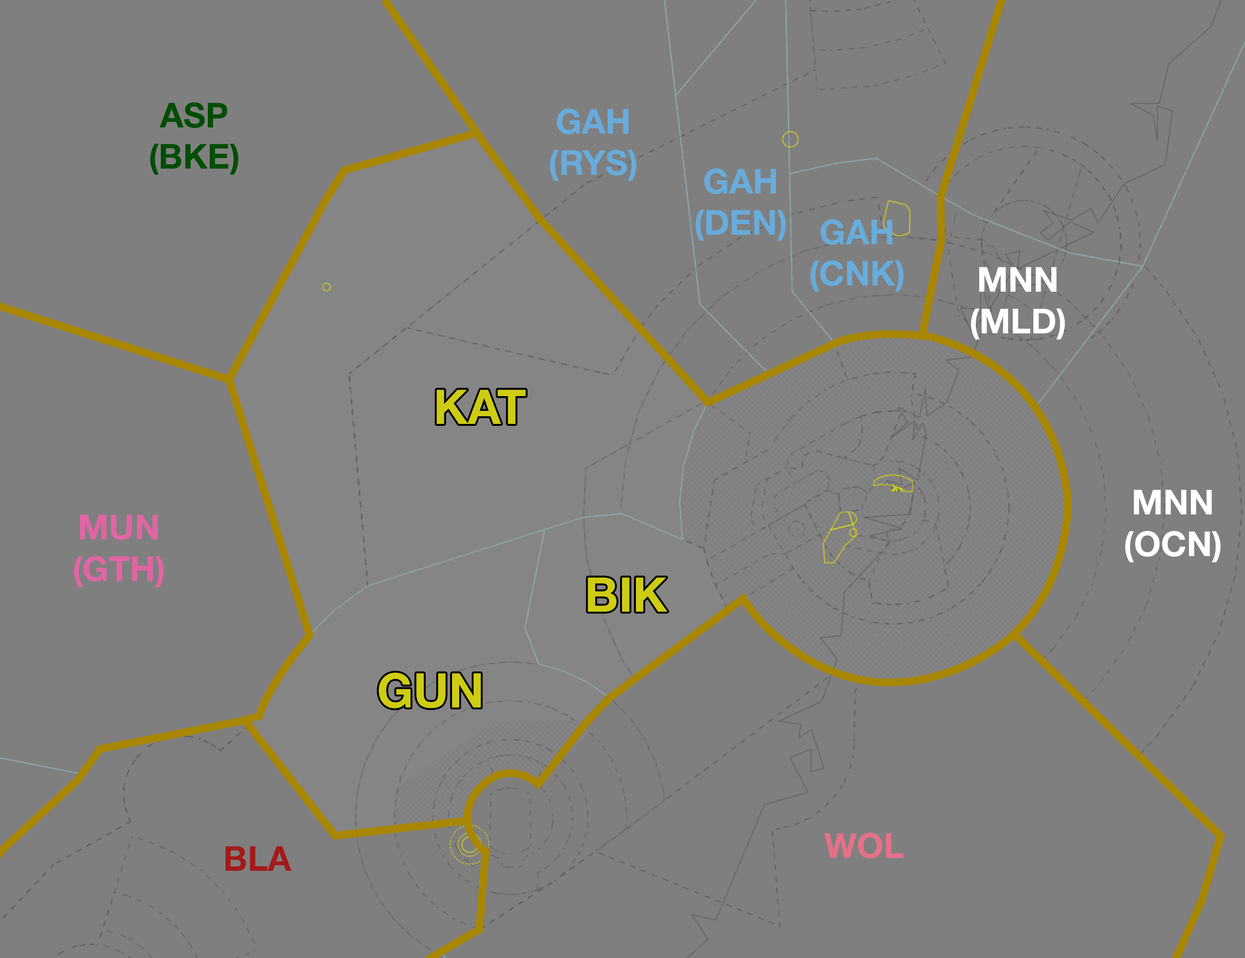
<style>
.page{position:relative;width:1245px;height:958px;background:#7f7f7f}
.page>*{position:absolute;margin:0}
.t1{font:34.5px "HelveticaNeue-Bold";color:#004d04}
.t2{font:34.5px "HelveticaNeue-Bold";color:#67acdc}
.t3{font:34.5px "HelveticaNeue-Bold";color:#ffffff}
.t4{font:47.9px "HelveticaNeue-Bold";color:#cecc13}
.t5{font:34.5px "HelveticaNeue-Bold";color:#e164a5}
.t6{font:34.5px "HelveticaNeue-Bold";color:#e57187}
.t7{font:34.5px "HelveticaNeue-Bold";color:#a31a1a}
</style>
<div class="page">
<p class="t1" style="left:150px;top:102px;width:88px;height:73px;text-align:center">ASP<br>(BKE)</p>
<p class="t2" style="left:550px;top:108px;width:86px;height:73px;text-align:center">GAH<br>(RYS)</p>
<p class="t2" style="left:695px;top:168px;width:91px;height:73px;text-align:center">GAH<br>(DEN)</p>
<p class="t2" style="left:810px;top:219px;width:94px;height:73px;text-align:center">GAH<br>(CNK)</p>
<p class="t3" style="left:971px;top:267px;width:94px;height:73px;text-align:center">MNN<br>(MLD)</p>
<p class="t4" style="left:437px;top:389px;width:89px;height:35px">KAT</p>
<p class="t3" style="left:1125px;top:489px;width:96px;height:73px;text-align:center">MNN<br>(OCN)</p>
<p class="t5" style="left:74px;top:514px;width:90px;height:73px;text-align:center">MUN<br>(GTH)</p>
<p class="t4" style="left:588px;top:577px;width:80px;height:35px">BIK</p>
<p class="t4" style="left:379px;top:672px;width:102px;height:36px">GUN</p>
<p class="t6" style="left:824px;top:832px;width:80px;height:27px">WOL</p>
<p class="t7" style="left:226px;top:846px;width:66px;height:25px">BLA</p>
</div>
